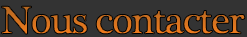
<style>
.page{position:relative;width:247px;height:37px;background:#333333}
.page>*{position:absolute;margin:0}
.t1{font:40px "PlantagenetCherokee";letter-spacing:-0.07em;font-weight:bold}
</style>
<div class="page">
<p class="t1" style="left:1px;top:5px;width:245px;height:30px">Nous contacter</p>
</div>
